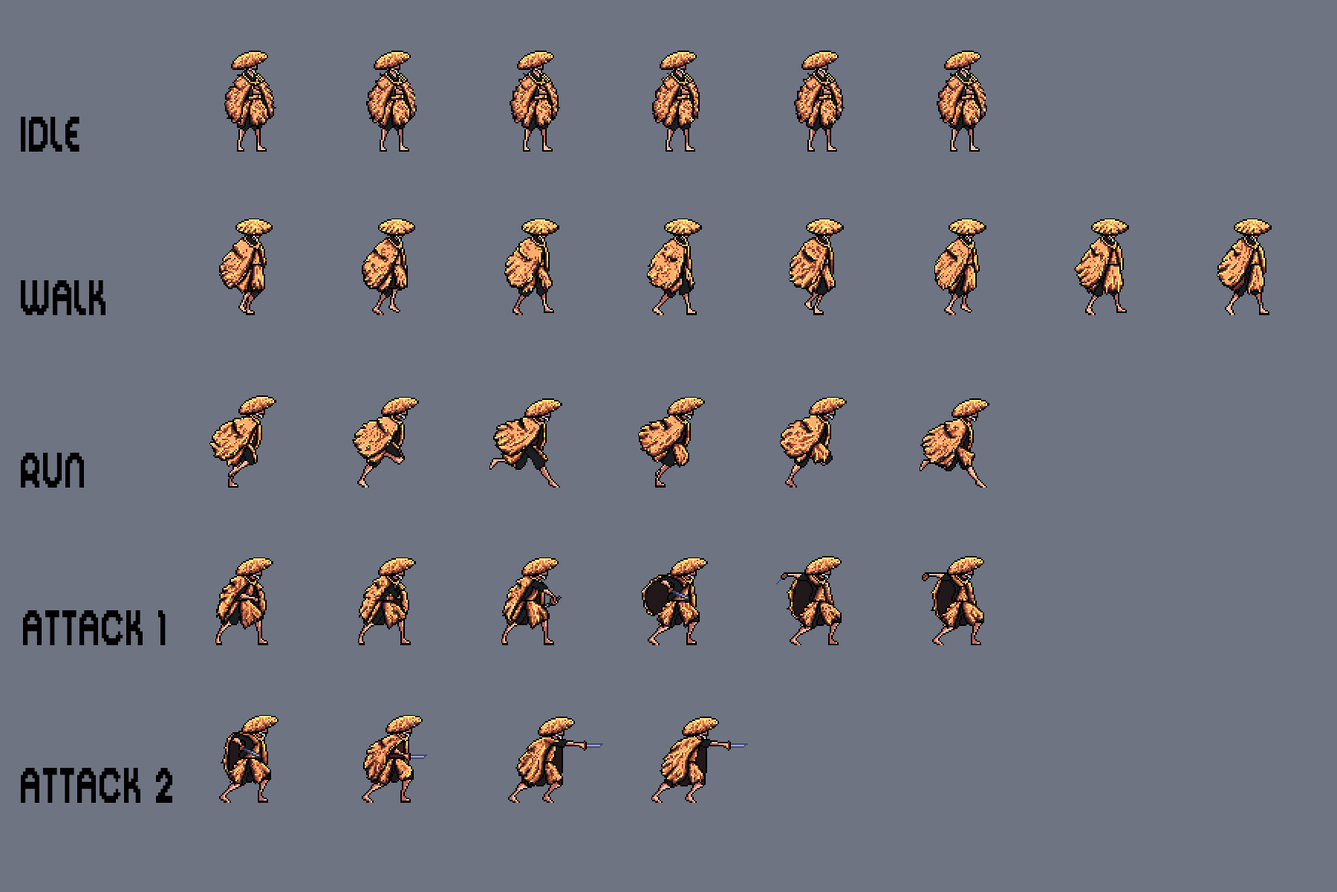
<style>
.page{position:relative;width:1337px;height:892px;background:#6e7482}
.page>*{position:absolute;margin:0}
.t1{font:55.7px "DigitalDisco";letter-spacing:0.03em;color:#000000;scale:0.67 1}
</style>
<div class="page">
<p class="t1" style="left:21px;top:117px;width:59px;height:35px">IDLE</p>
<p class="t1" style="left:21px;top:280px;width:85px;height:35px">WALK</p>
<p class="t1" style="left:21px;top:452px;width:63px;height:35px">RUN</p>
<p class="t1" style="left:23px;top:610px;width:143px;height:35px">ATTACK 1</p>
<p class="t1" style="left:21px;top:768px;width:151px;height:34px">ATTACK 2<br><br> 2 3</p>
</div>
